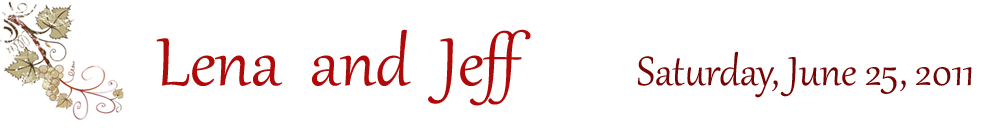
<style>
.page{position:relative;width:1000px;height:130px;background:#ffffff}
.page>*{position:absolute;margin:0}
.t1{font:83.3px "Gabriola";color:#af0a0a}
.t2{font:50px "Gabriola";color:#740505}
</style>
<div class="page">
<p class="t1" style="left:156px;top:29px;width:375px;height:77px">Lena  and  Jeff</p>
<p class="t2" style="left:638px;top:51px;width:334px;height:47px">Saturday, June 25, 2011</p>
</div>
